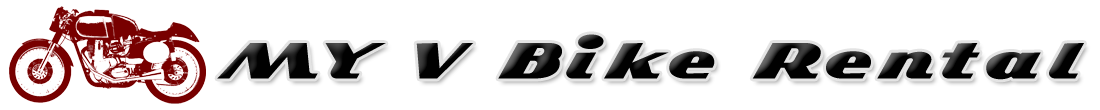
<style>
.page{position:relative;width:1100px;height:110px;background:#ffffff}
.page>*{position:absolute;margin:0}
.t1{font:50.6px "KelvinizedNormal";letter-spacing:0.16em;color:#010101}
</style>
<div class="page">
<p class="t1" style="left:217px;top:34px;width:867px;height:46px">MY V Bike Rental</p>
</div>
